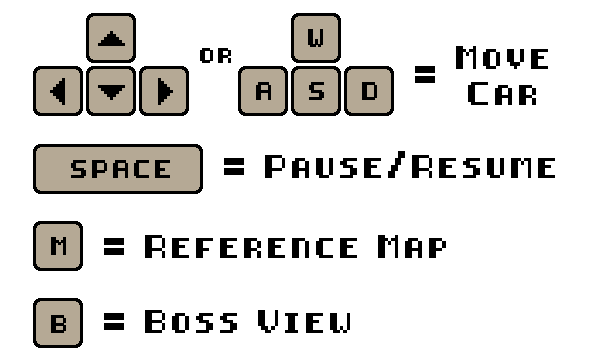
<style>
.page{position:relative;width:600px;height:360px;background:#ffffff}
.page>*{position:absolute;margin:0}
.t1{font:15px "8-bit-pusab";letter-spacing:0.2em;color:#000000}
.t2{font:20px/36px "8-bit-pusab";letter-spacing:0.2em;color:#000000}
.t3{font:20px "8-bit-pusab";letter-spacing:0.2em;color:#000000}
</style>
<div class="page">
<p class="t1" style="left:200px;top:48px;width:31px;height:15px">or</p>
<p class="t2" style="left:456px;top:46px;width:92px;height:59px;text-align:center">Move<br>Car</p>
<p class="t3" style="left:415px;top:66px;width:20px;height:17px">=</p>
<p class="t3" style="left:224px;top:158px;width:20px;height:17px">=</p>
<p class="t3" style="left:265px;top:151px;width:290px;height:27px">Pause/Resume</p>
<p class="t3" style="left:104px;top:238px;width:20px;height:17px">=</p>
<p class="t3" style="left:145px;top:235px;width:301px;height:23px">Reference Map</p>
<p class="t3" style="left:104px;top:313px;width:20px;height:17px">=</p>
<p class="t3" style="left:145px;top:310px;width:205px;height:23px">Boss View</p>
</div>
